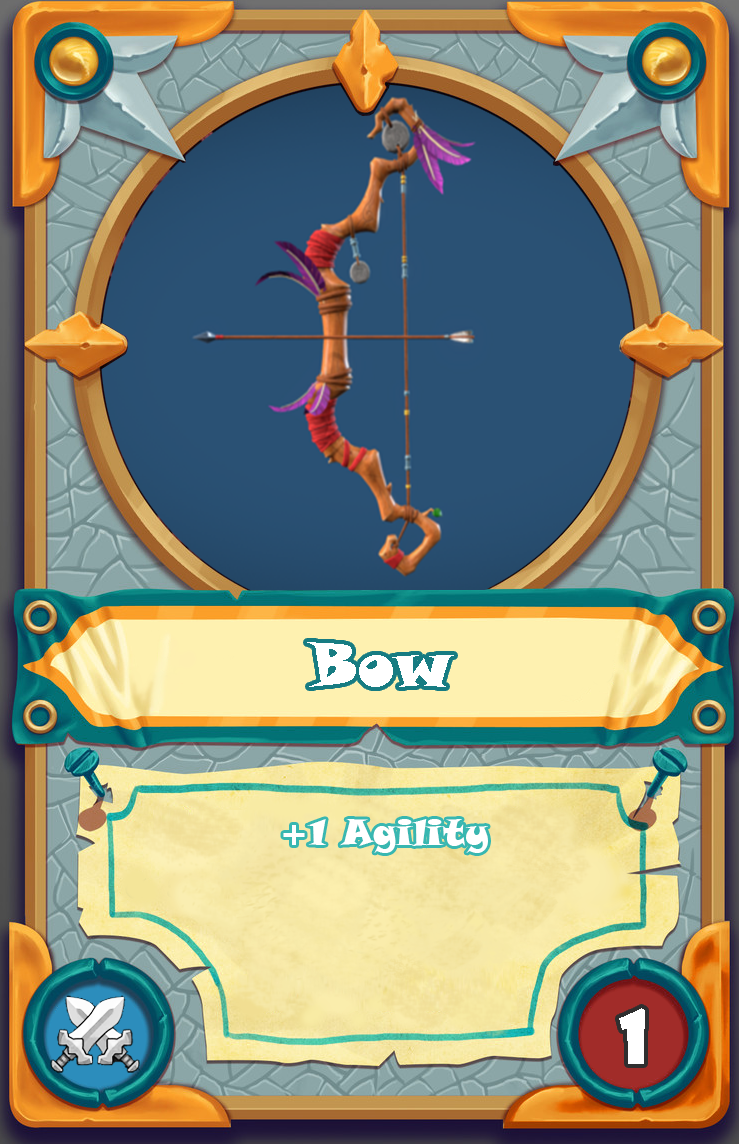
<style>
.page{position:relative;width:739px;height:1144px}
.page>*{position:absolute;margin:0}
.t1{font:60px "SnapITC-Regular";color:#ffffff}
.t2{font:36px "SnapITC-Regular";color:#ffffff}
.t3{font:72px "ShowcardGothic-Reg";color:#ffffff}
</style>
<div class="page">
<p class="t1" style="left:307px;top:642px;width:147px;height:45px">Bow</p>
<p class="t2" style="left:283px;top:819px;width:205px;height:34px">+1 Agility</p>
<p class="t3" style="left:619px;top:1008px;width:26px;height:56px">1</p>
</div>
